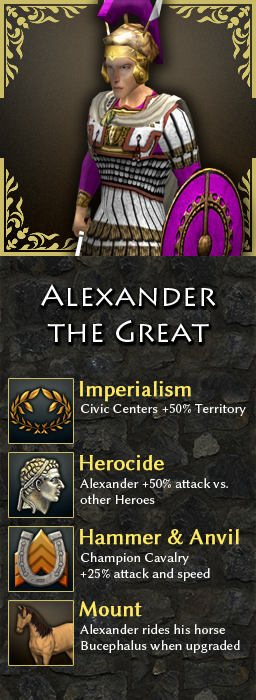
<style>
.page{position:relative;width:256px;height:700px}
.page>*{position:absolute;margin:0}
.t1{font:30px "LithosPro-Regular";color:#ffffff}
.t2{font:22px "LinBiolinumO";color:#ffe963;font-weight:bold}
.t3{font:14px "LinBiolinumO";color:#ffffff}
</style>
<div class="page">
<p class="t1" style="left:41px;top:284px;width:175px;height:58px;text-align:center">Alexander<br>the Great</p>
<p class="t2" style="left:80px;top:381px;width:111px;height:21px">Imperialism</p>
<p class="t3" style="left:81px;top:403px;width:165px;height:13px">Civic Centers +50% Territory</p>
<p class="t2" style="left:80px;top:455px;width:84px;height:16px">Herocide</p>
<p class="t3" style="left:80px;top:478px;width:148px;height:26px">Alexander +50% attack vs. <br>other Heroes</p>
<p class="t2" style="left:80px;top:529px;width:159px;height:16px">Hammer &amp; Anvil</p>
<p class="t3" style="left:80px;top:552px;width:130px;height:29px">Champion Cavalry<br>+25% attack and speed</p>
<p class="t2" style="left:79px;top:601px;width:63px;height:16px">Mount</p>
<p class="t3" style="left:80px;top:624px;width:160px;height:29px">Alexander rides his horse<br>Bucephalus when upgraded</p>
</div>
